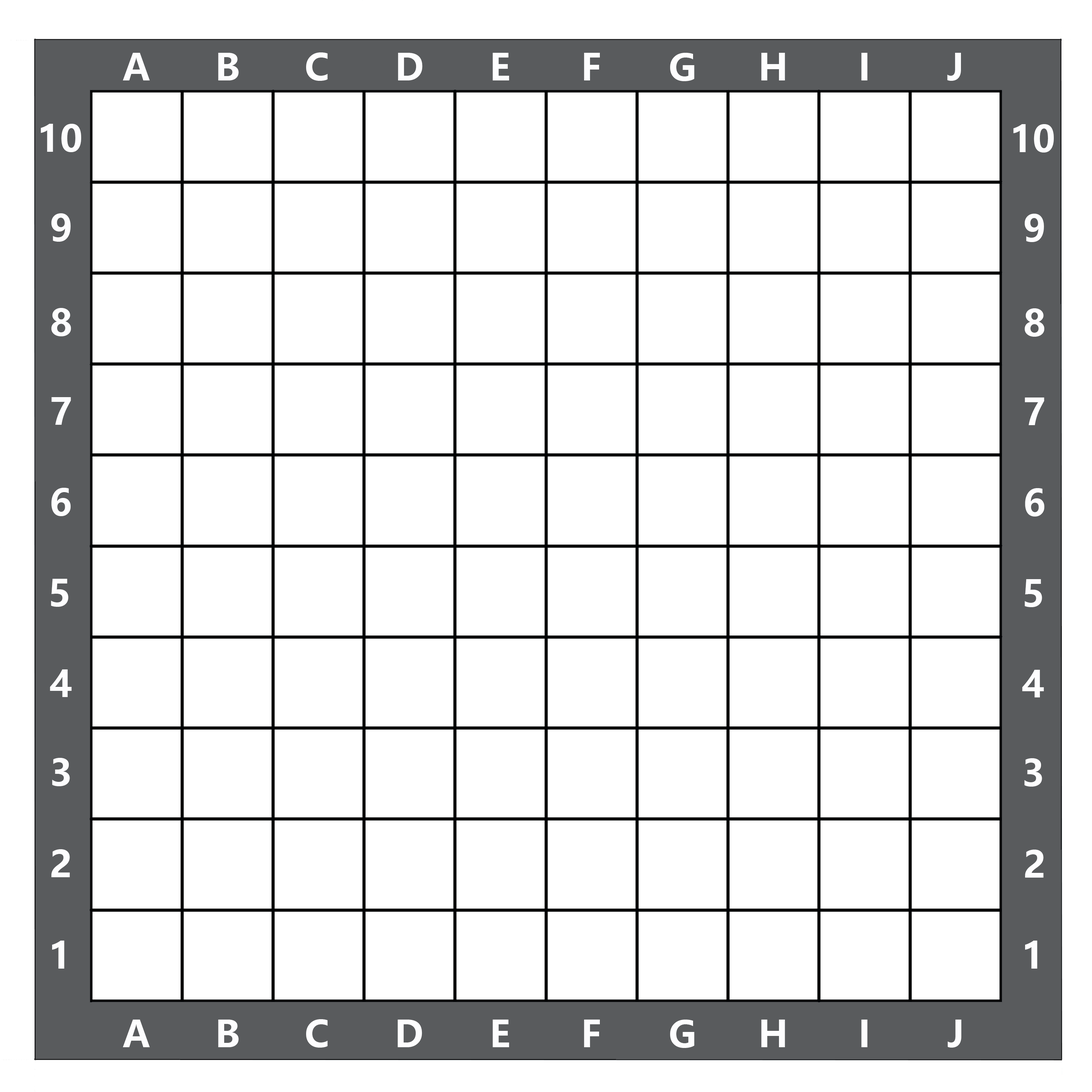
<style>
.page{position:relative;width:1092px;height:1092px;background:#ffffff}
.page>*{position:absolute;margin:0}
.t1{font:36.4px "MicrosoftYaHei-Bold";color:#fdfdfe}
</style>
<div class="page">
<p class="t1" style="left:123px;top:53px;width:27px;height:27px">A</p>
<p class="t1" style="left:218px;top:53px;width:21px;height:27px">B</p>
<p class="t1" style="left:306px;top:52px;width:22px;height:29px">C</p>
<p class="t1" style="left:398px;top:53px;width:25px;height:27px">D</p>
<p class="t1" style="left:492px;top:53px;width:17px;height:27px">E</p>
<p class="t1" style="left:584px;top:53px;width:16px;height:27px">F</p>
<p class="t1" style="left:670px;top:53px;width:25px;height:28px">G</p>
<p class="t1" style="left:761px;top:53px;width:24px;height:27px">H</p>
<p class="t1" style="left:861px;top:53px;width:6px;height:27px">I</p>
<p class="t1" style="left:947px;top:53px;width:14px;height:28px">J</p>
<p class="t1" style="left:41px;top:124px;width:40px;height:28px">10</p>
<p class="t1" style="left:1013px;top:124px;width:41px;height:29px">10</p>
<p class="t1" style="left:51px;top:213px;width:20px;height:29px">9</p>
<p class="t1" style="left:1025px;top:214px;width:19px;height:28px">9</p>
<p class="t1" style="left:51px;top:308px;width:20px;height:28px">8</p>
<p class="t1" style="left:1025px;top:308px;width:19px;height:29px">8</p>
<p class="t1" style="left:51px;top:397px;width:20px;height:28px">7</p>
<p class="t1" style="left:1025px;top:397px;width:19px;height:28px">7</p>
<p class="t1" style="left:51px;top:488px;width:20px;height:28px">6</p>
<p class="t1" style="left:1025px;top:488px;width:19px;height:29px">6</p>
<p class="t1" style="left:51px;top:579px;width:17px;height:28px">5</p>
<p class="t1" style="left:1025px;top:579px;width:17px;height:28px">5</p>
<p class="t1" style="left:50px;top:669px;width:22px;height:28px">4</p>
<p class="t1" style="left:1022px;top:670px;width:22px;height:27px">4</p>
<p class="t1" style="left:52px;top:758px;width:18px;height:28px">3</p>
<p class="t1" style="left:1024px;top:758px;width:18px;height:29px">3</p>
<p class="t1" style="left:51px;top:849px;width:19px;height:28px">2</p>
<p class="t1" style="left:1025px;top:850px;width:19px;height:28px">2</p>
<p class="t1" style="left:52px;top:941px;width:12px;height:28px">1</p>
<p class="t1" style="left:1025px;top:941px;width:12px;height:28px">1</p>
<p class="t1" style="left:123px;top:1020px;width:27px;height:27px">A</p>
<p class="t1" style="left:218px;top:1020px;width:21px;height:27px">B</p>
<p class="t1" style="left:306px;top:1019px;width:22px;height:29px">C</p>
<p class="t1" style="left:397px;top:1020px;width:25px;height:27px">D</p>
<p class="t1" style="left:492px;top:1020px;width:17px;height:27px">E</p>
<p class="t1" style="left:584px;top:1020px;width:16px;height:27px">F</p>
<p class="t1" style="left:670px;top:1020px;width:25px;height:28px">G</p>
<p class="t1" style="left:761px;top:1020px;width:24px;height:27px">H</p>
<p class="t1" style="left:861px;top:1020px;width:6px;height:27px">I</p>
<p class="t1" style="left:947px;top:1020px;width:14px;height:28px">J</p>
</div>
